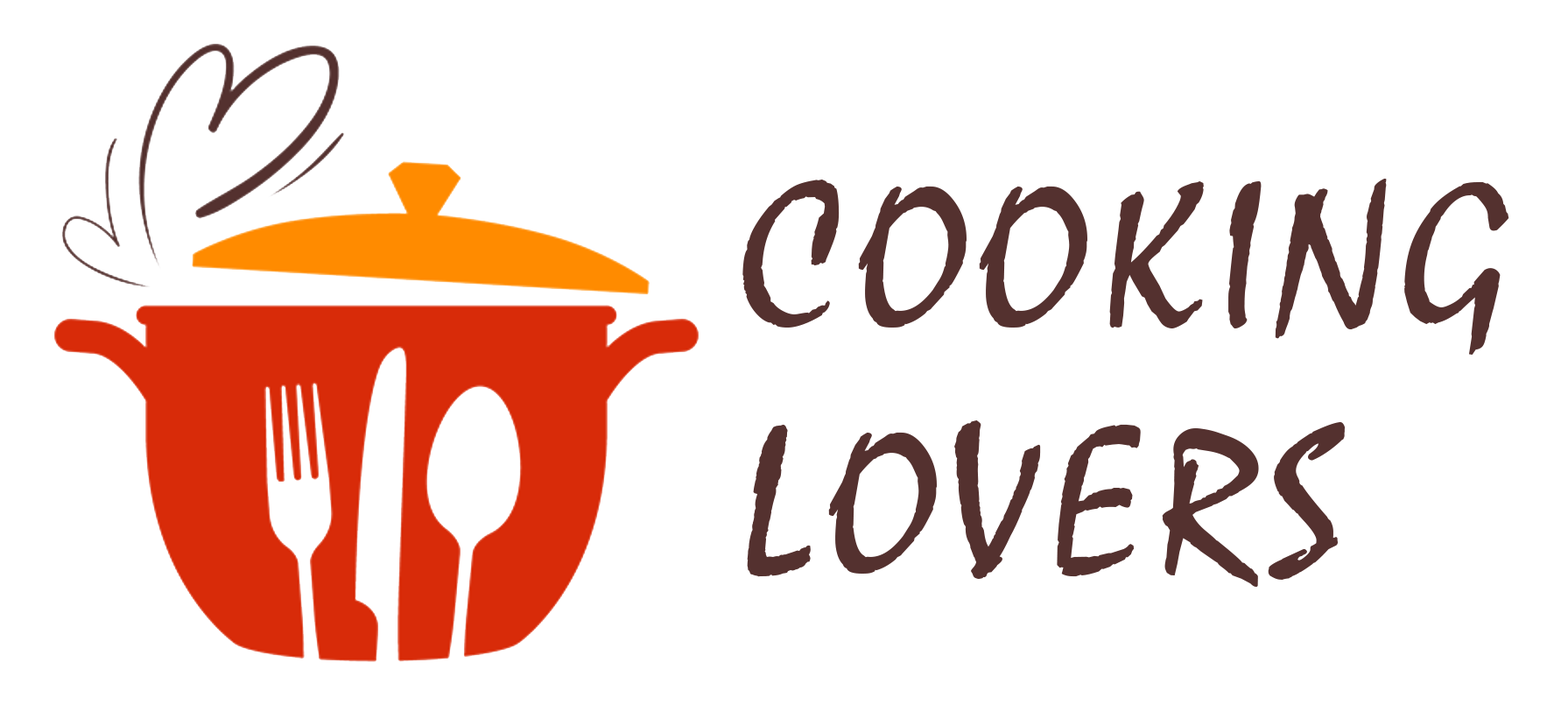
<style>
.page{position:relative;width:1568px;height:705px;background:#ffffff}
.page>*{position:absolute;margin:0}
.t1{font:203.1px "Staccato222BT-Regular";letter-spacing:0.01em;color:#54312f}
</style>
<div class="page">
<p class="t1" style="left:742px;top:178px;width:767px;height:409px">COOKING<br>LOVERS</p>
</div>
